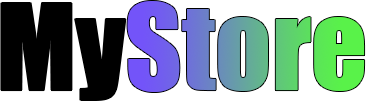
<style>
.page{position:relative;width:366px;height:101px;background:#ffffff}
.page>*{position:absolute;margin:0}
.t1{font:110px "Impact"}
</style>
<div class="page">
<p class="t1" style="left:1px;top:1px;width:364px;height:99px">MyStore</p>
</div>
